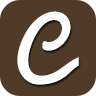
<style>
.page{position:relative;width:96px;height:96px;background:#4f3b28}
.page>*{position:absolute;margin:0}
.t1{font:75px "Pacifico";color:#ffffff}
</style>
<div class="page">
<p class="t1" style="left:17px;top:11px;width:62px;height:74px">C</p>
</div>
